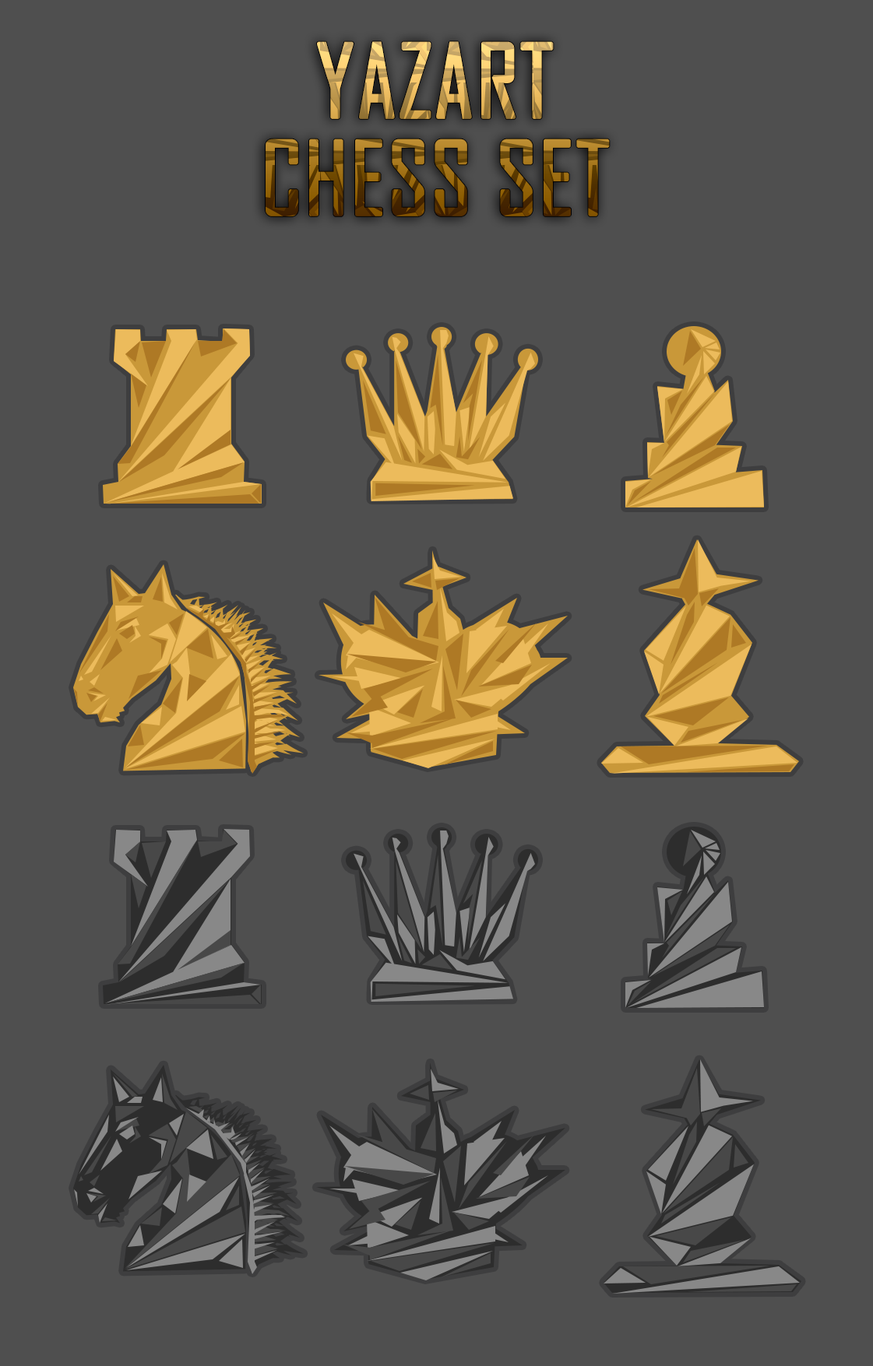
<style>
.page{position:relative;width:873px;height:1366px;background:#4f4f4f}
.page>*{position:absolute;margin:0}
.t1{font:97.3px/97.3px "AgencyFBCyrillic";font-weight:bold}
</style>
<div class="page">
<p class="t1" style="left:265px;top:41px;width:345px;height:175px;text-align:center">YAZART<br>CHESS SET</p>
</div>
